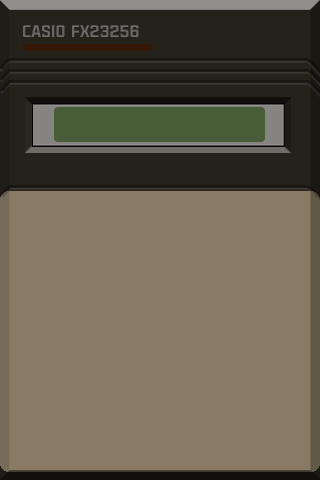
<style>
.page{position:relative;width:320px;height:480px;background:#897a64}
.page>*{position:absolute;margin:0}
.t1{font:16.7px "Binaria-Black";color:#676563}
</style>
<div class="page">
<p class="t1" style="left:23px;top:25px;width:116px;height:12px">CASIO FX23256</p>
</div>
